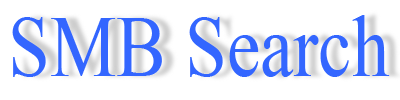
<style>
.page{position:relative;width:400px;height:100px;background:#ffffff}
.page>*{position:absolute;margin:0}
.t1{font:87.9px "TimesNewRomanPSMT";color:#3366ff;scale:0.85 1}
</style>
<div class="page">
<p class="t1" style="left:12px;top:15px;width:378px;height:62px">SMB Search</p>
</div>
